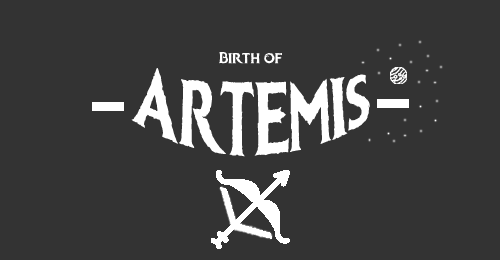
<style>
.page{position:relative;width:500px;height:260px;background:#333333}
.page>*{position:absolute;margin:0}
.t1{font:16px "Icekingdom-Bold";letter-spacing:0.015em;color:#ffffff}
.t2{font:64px "Icekingdom-Bold";letter-spacing:0.015em;color:#ffffff}
</style>
<div class="page">
<p class="t1" style="left:219px;top:52px;width:63px;height:12px">Birth of</p>
<p class="t2" style="left:131px;top:68px;width:239px;height:89px">Artemis</p>
</div>
